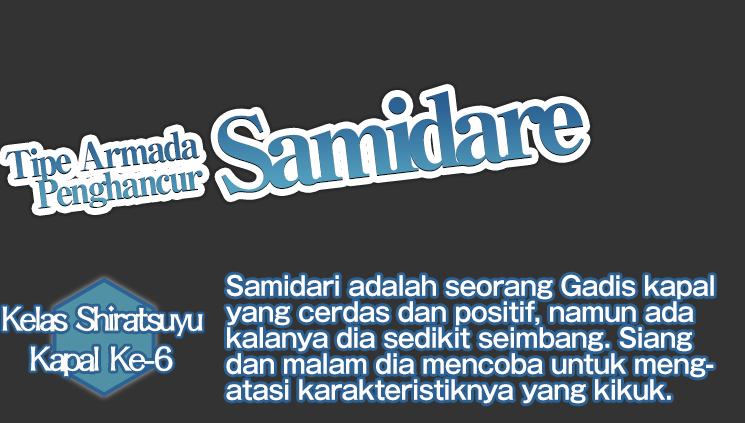
<style>
.page{position:relative;width:745px;height:423px;background:#333333}
.page>*{position:absolute;margin:0}
.t1{font:100px "RyuminPro-ExHeavy";letter-spacing:-0.1em;color:#4081a9}
.t2{font:38px/32px "RyuminPro-ExHeavy";letter-spacing:-0.08em;scale:0.92 1}
.t3{font:26px/26px "GothicMB101Pro-DeBold";letter-spacing:-0.02em;color:#fdfdfd;scale:0.95 1}
.t4{font:40px/40px "DFLungMen-W9-WINP-BF";letter-spacing:-0.09em;color:#fdfdfd;scale:0.97 1}
.t5{font:40px/40px "DFLungMen-W9-WINP-BF";letter-spacing:-0.09em;color:#fdfdfd}
</style>
<div class="page">
<p class="t1" style="left:217px;top:90px;width:367px;height:106px;rotate:-7deg">Samidare</p>
<p class="t2" style="left:5px;top:131px;width:198px;height:78px;text-align:right;rotate:-7deg">Tipe Armada<br>Penghancur</p>
<p class="t3" style="left:226px;top:274px;width:488px;height:130px">Samidari adalah seorang Gadis kapal<br>yang cerdas dan positif, namun ada <br>kalanya dia sedikit seimbang. Siang <br>dan malam dia mencoba untuk meng-<br>atasi karakteristiknya yang kikuk.</p>
<p class="t4" style="left:2px;top:305px;width:201px;height:72px;text-align:center">Kelas Shiratsuyu<br><span class="t5">Kapal Ke-6</span></p>
</div>
